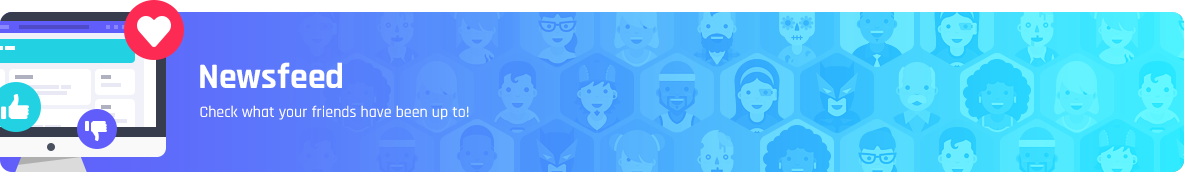
<style>
.page{position:relative;width:1184px;height:172px}
.page>*{position:absolute;margin:0}
.t1{font:36px "Rajdhani-Bold";color:#ffffff}
.t2{font:16px "Rajdhani-Medium";color:#ffffff}
</style>
<div class="page">
<p class="t1" style="left:200px;top:62px;width:142px;height:26px">Newsfeed</p>
<p class="t2" style="left:200px;top:105px;width:269px;height:15px">Check what your friends have been up to!</p>
</div>
